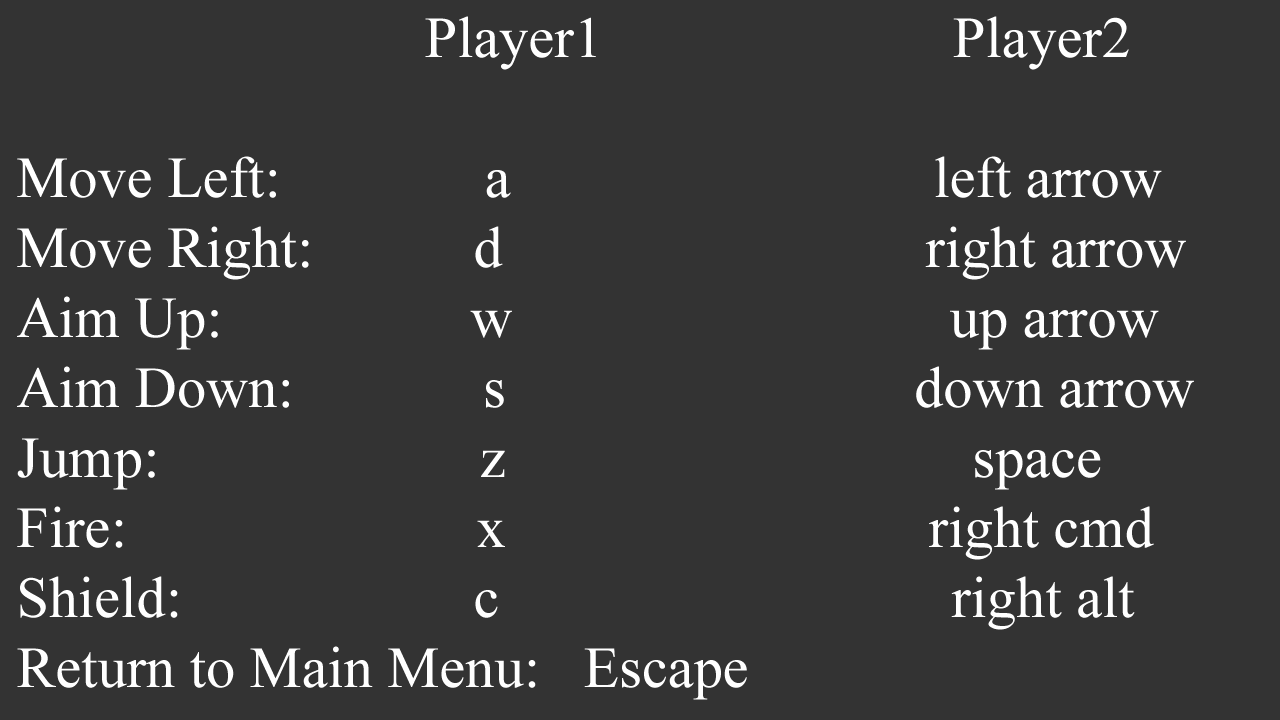
<style>
.page{position:relative;width:1280px;height:720px;background:#333333}
.page>*{position:absolute;margin:0}
.t1{font:58.3px "TimesNewRomanPSMT";color:#ffffff}
</style>
<div class="page">
<p class="t1" style="left:17px;top:16px;width:1177px;height:684px">Player1                        Player2<br><br>Move Left:              a                             left arrow<br>Move Right:           d                             right arrow<br>Aim Up:                 w                              up arrow<br>Aim Down:             s                            down arrow<br>Jump:                      z                                space<br>Fire:                        x                             right cmd<br>Shield:                    c                               right alt<br>Return to Main Menu:   Escape</p>
</div>
